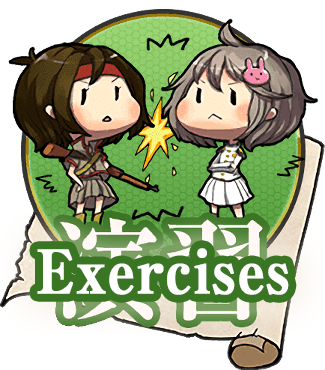
<style>
.page{position:relative;width:325px;height:370px;background:#ffffff}
.page>*{position:absolute;margin:0}
.t1{font:60px "RyuminPro-ExBold";color:#ffffff;font-weight:bold;scale:0.9 1}
</style>
<div class="page">
<p class="t1" style="left:37px;top:248px;width:252px;height:47px">Exercises</p>
</div>
